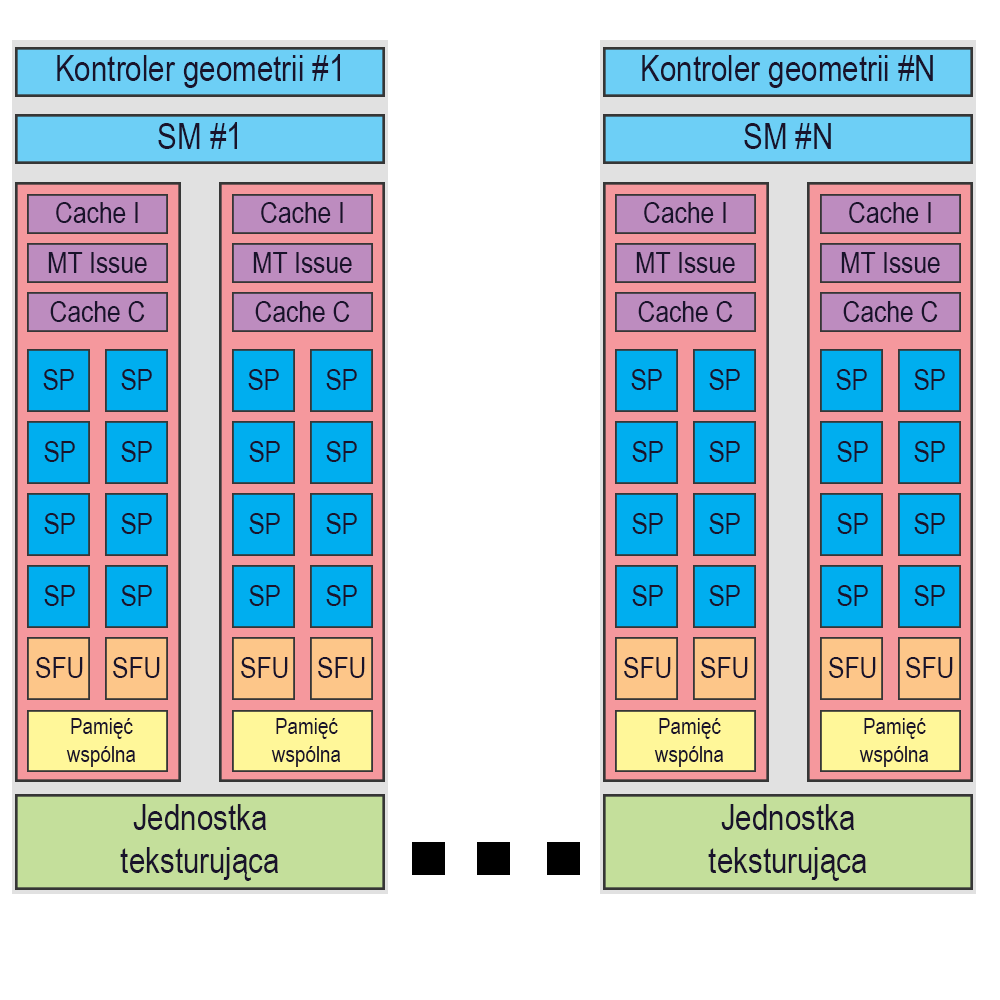
<style>
.page{position:relative;width:1000px;height:1000px;background:#ffffff}
.page>*{position:absolute;margin:0}
.t1{font:36px "ArialNarrow";color:#19132b}
.t2{font:30px "ArialNarrow";color:#19132b}
.t3{font:23px "ArialNarrow";color:#19132b}
</style>
<div class="page">
<p class="t1" style="left:57px;top:54px;width:283px;height:34px">Kontroler geometrii #1</p>
<p class="t1" style="left:642px;top:55px;width:291px;height:33px">Kontroler geometrii #N</p>
<p class="t1" style="left:158px;top:122px;width:79px;height:27px">SM #1</p>
<p class="t1" style="left:744px;top:123px;width:87px;height:26px">SM #N</p>
<p class="t2" style="left:56px;top:202px;width:82px;height:21px">Cache I</p>
<p class="t2" style="left:261px;top:202px;width:82px;height:21px">Cache I</p>
<p class="t2" style="left:644px;top:202px;width:82px;height:21px">Cache I</p>
<p class="t2" style="left:849px;top:202px;width:82px;height:21px">Cache I</p>
<p class="t2" style="left:48px;top:252px;width:99px;height:21px">MT Issue</p>
<p class="t2" style="left:253px;top:252px;width:99px;height:21px">MT Issue</p>
<p class="t2" style="left:636px;top:252px;width:99px;height:21px">MT Issue</p>
<p class="t2" style="left:841px;top:252px;width:99px;height:21px">MT Issue</p>
<p class="t2" style="left:50px;top:301px;width:95px;height:21px">Cache C</p>
<p class="t2" style="left:255px;top:301px;width:95px;height:21px">Cache C</p>
<p class="t2" style="left:638px;top:301px;width:95px;height:21px">Cache C</p>
<p class="t2" style="left:843px;top:301px;width:95px;height:21px">Cache C</p>
<p class="t2" style="left:43px;top:369px;width:31px;height:21px">SP</p>
<p class="t2" style="left:121px;top:369px;width:31px;height:21px">SP</p>
<p class="t2" style="left:248px;top:369px;width:31px;height:21px">SP</p>
<p class="t2" style="left:326px;top:369px;width:31px;height:21px">SP</p>
<p class="t2" style="left:631px;top:369px;width:31px;height:21px">SP</p>
<p class="t2" style="left:709px;top:369px;width:31px;height:21px">SP</p>
<p class="t2" style="left:836px;top:369px;width:31px;height:21px">SP</p>
<p class="t2" style="left:914px;top:369px;width:31px;height:21px">SP</p>
<p class="t2" style="left:44px;top:441px;width:31px;height:21px">SP</p>
<p class="t2" style="left:121px;top:441px;width:31px;height:21px">SP</p>
<p class="t2" style="left:249px;top:441px;width:31px;height:21px">SP</p>
<p class="t2" style="left:326px;top:441px;width:31px;height:21px">SP</p>
<p class="t2" style="left:632px;top:441px;width:31px;height:21px">SP</p>
<p class="t2" style="left:709px;top:441px;width:31px;height:21px">SP</p>
<p class="t2" style="left:837px;top:441px;width:31px;height:21px">SP</p>
<p class="t2" style="left:914px;top:441px;width:31px;height:21px">SP</p>
<p class="t2" style="left:44px;top:513px;width:31px;height:21px">SP</p>
<p class="t2" style="left:121px;top:513px;width:31px;height:21px">SP</p>
<p class="t2" style="left:249px;top:513px;width:31px;height:21px">SP</p>
<p class="t2" style="left:326px;top:513px;width:31px;height:21px">SP</p>
<p class="t2" style="left:632px;top:513px;width:31px;height:21px">SP</p>
<p class="t2" style="left:709px;top:513px;width:31px;height:21px">SP</p>
<p class="t2" style="left:837px;top:513px;width:31px;height:21px">SP</p>
<p class="t2" style="left:914px;top:513px;width:31px;height:21px">SP</p>
<p class="t2" style="left:44px;top:585px;width:31px;height:21px">SP</p>
<p class="t2" style="left:121px;top:585px;width:31px;height:21px">SP</p>
<p class="t2" style="left:249px;top:585px;width:31px;height:21px">SP</p>
<p class="t2" style="left:326px;top:585px;width:31px;height:21px">SP</p>
<p class="t2" style="left:632px;top:585px;width:31px;height:21px">SP</p>
<p class="t2" style="left:709px;top:585px;width:31px;height:21px">SP</p>
<p class="t2" style="left:837px;top:585px;width:31px;height:21px">SP</p>
<p class="t2" style="left:914px;top:585px;width:31px;height:21px">SP</p>
<p class="t2" style="left:36px;top:657px;width:47px;height:21px">SFU</p>
<p class="t2" style="left:113px;top:657px;width:47px;height:21px">SFU</p>
<p class="t2" style="left:241px;top:657px;width:47px;height:21px">SFU</p>
<p class="t2" style="left:318px;top:657px;width:47px;height:21px">SFU</p>
<p class="t2" style="left:624px;top:657px;width:47px;height:21px">SFU</p>
<p class="t2" style="left:701px;top:657px;width:47px;height:21px">SFU</p>
<p class="t2" style="left:829px;top:657px;width:47px;height:21px">SFU</p>
<p class="t2" style="left:906px;top:657px;width:47px;height:21px">SFU</p>
<p class="t3" style="left:66px;top:718px;width:69px;height:49px;text-align:center">Pamięć <br>wspólna</p>
<p class="t3" style="left:271px;top:718px;width:69px;height:49px;text-align:center">Pamięć <br>wspólna</p>
<p class="t3" style="left:654px;top:718px;width:69px;height:49px;text-align:center">Pamięć <br>wspólna</p>
<p class="t3" style="left:859px;top:718px;width:69px;height:49px;text-align:center">Pamięć <br>wspólna</p>
<p class="t1" style="left:120px;top:804px;width:158px;height:77px;text-align:center">Jednostka<br>teksturująca</p>
<p class="t1" style="left:708px;top:804px;width:158px;height:77px;text-align:center">Jednostka<br>teksturująca</p>
</div>
